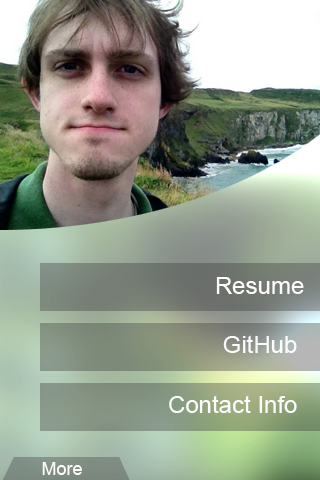
<style>
.page{position:relative;width:320px;height:480px}
.page>*{position:absolute;margin:0}
.t1{font:24px "ArialMT";color:#fcfcfc}
.t2{font:18px "ArialMT";color:#fcfcfc}
</style>
<div class="page">
<p class="t1" style="left:216px;top:277px;width:88px;height:17px">Resume</p>
<p class="t1" style="left:223px;top:335px;width:74px;height:18px">GitHub</p>
<p class="t1" style="left:169px;top:395px;width:128px;height:18px">Contact Info</p>
<p class="t2" style="left:42px;top:462px;width:40px;height:13px">More</p>
</div>
